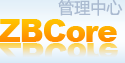
<style>
.page{position:relative;width:125px;height:63px}
.page>*{position:absolute;margin:0}
.t1{font:16px "MicrosoftYaHei";color:#aabad0}
.t2{font:31px "Arial-Black";letter-spacing:-0.04em}
</style>
<div class="page">
<p class="t1" style="left:58px;top:0px;width:65px;height:16px">管理中心</p>
<p class="t2" style="left:0px;top:19px;width:117px;height:23px">ZBCore</p>
</div>
